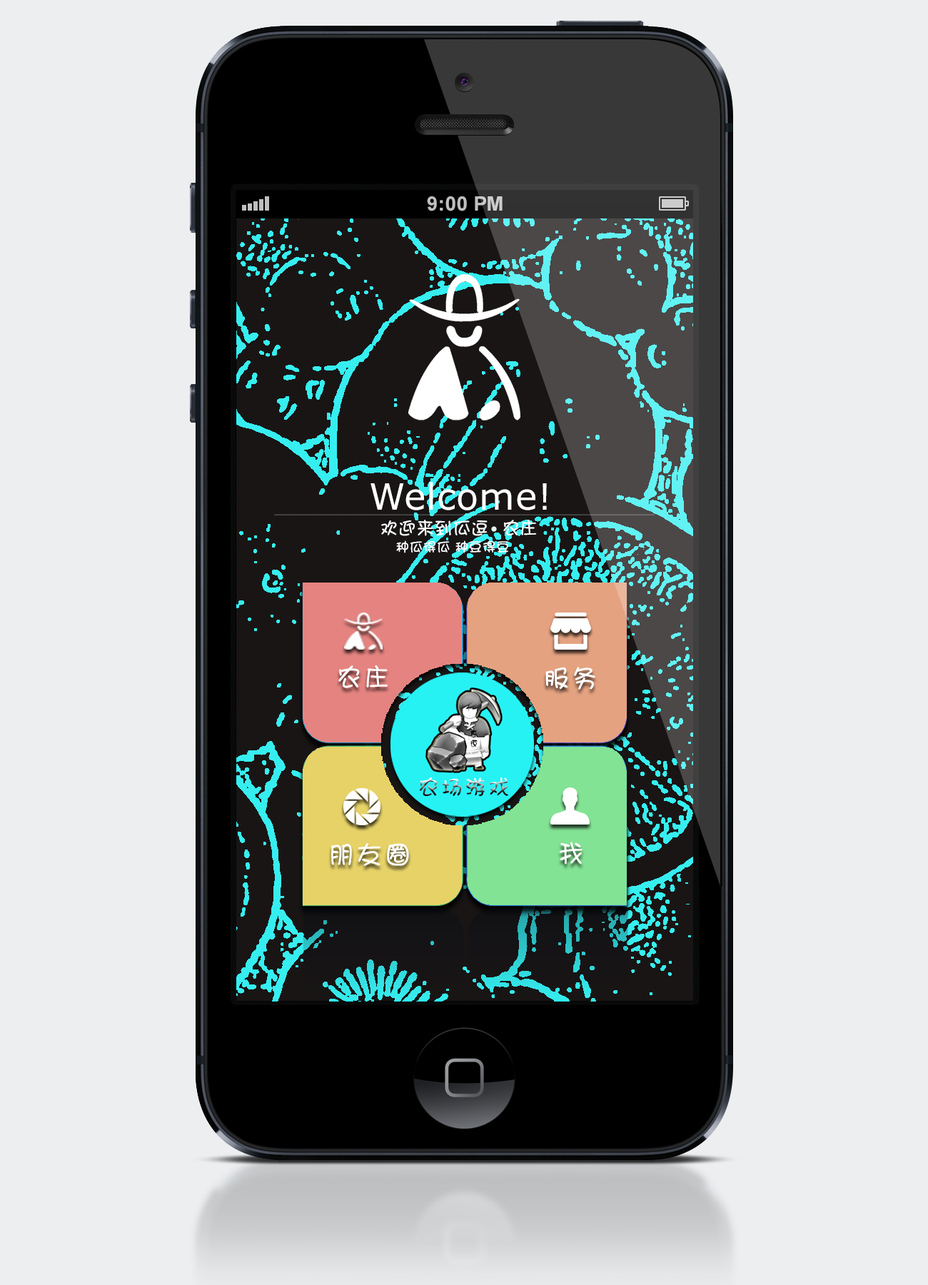
<style>
.page{position:relative;width:928px;height:1285px;background:#eceeef}
.page>*{position:absolute;margin:0}
.t1{font:36.4px "Verdana";letter-spacing:0.015em;color:#ffffff}
.t2{font:17.8px "DFPShaoNvW5";letter-spacing:0.02em;color:#ffffff}
.t3{font:13.4px "DFPShaoNvW5";letter-spacing:0.02em;color:#ffffff}
.t4{font:25.7px "DFPShaoNvW5";letter-spacing:0.1em;color:#ffffff}
.t5{font:21.4px "DFPShaoNvW5";letter-spacing:0.1em}
</style>
<div class="page">
<p class="t1" style="left:370px;top:482px;width:177px;height:28px">Welcome!</p>
<p class="t2" style="left:381px;top:520px;width:156px;height:16px">欢迎来到瓜逗  农庄</p>
<p class="t3" style="left:396px;top:540px;width:112px;height:13px">种瓜得瓜 种豆得豆</p>
<p class="t4" style="left:338px;top:665px;width:50px;height:23px">农庄</p>
<p class="t4" style="left:545px;top:667px;width:50px;height:23px">服务</p>
<p class="t5" style="left:420px;top:777px;width:88px;height:19px">农场游戏</p>
<p class="t4" style="left:331px;top:842px;width:78px;height:24px">朋友圈</p>
<p class="t4" style="left:559px;top:842px;width:24px;height:22px">我</p>
</div>
